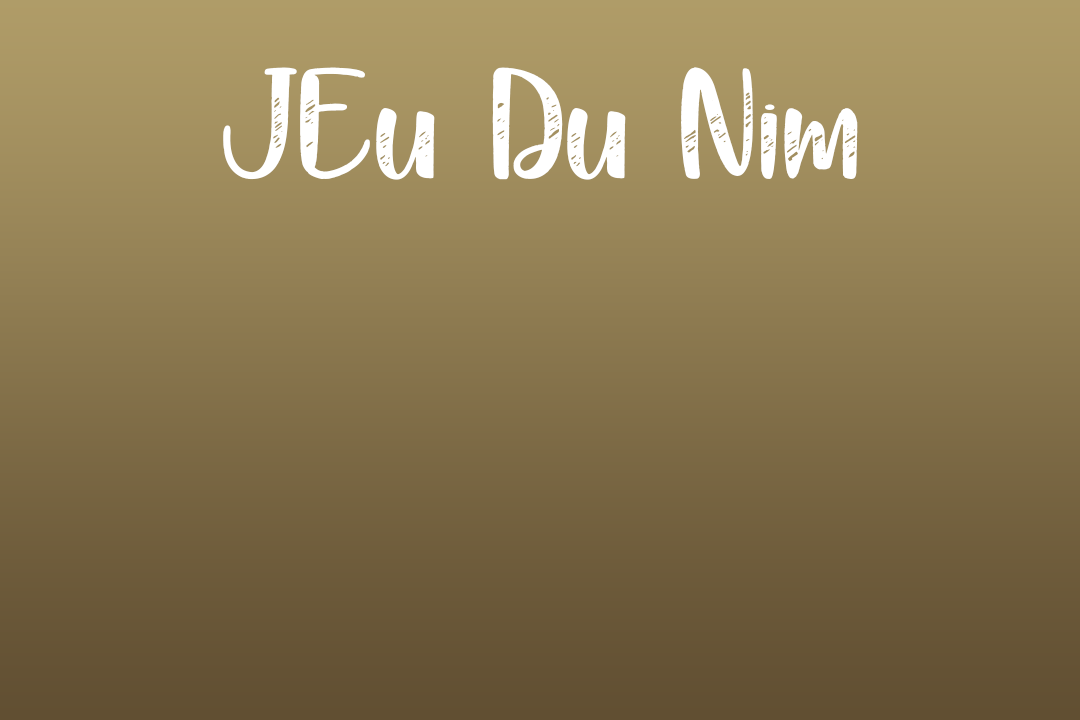
<style>
.page{position:relative;width:1080px;height:720px}
.page>*{position:absolute;margin:0}
.t1{font:185px "BlackParadePersonalUse";color:#ffffff}
</style>
<div class="page">
<p class="t1" style="left:223px;top:67px;width:635px;height:113px">JEu Du Nim</p>
</div>
